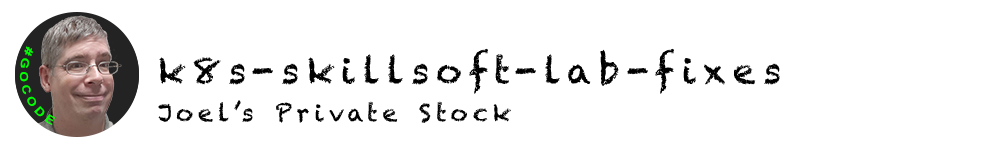
<style>
.page{position:relative;width:1000px;height:150px;background:#ffffff}
.page>*{position:absolute;margin:0}
.t1{font:11.2px "Arial-BoldMT";letter-spacing:0.2em;color:#00ff00}
.t2{font:36px "Chalkduster";letter-spacing:0.2em;color:#000000}
.t3{font:24px "Chalkduster";letter-spacing:0.2em;color:#000000}
</style>
<div class="page">
<p class="t1" style="left:19px;top:46px;width:37px;height:80px;rotate:72deg">#GOCODE</p>
<p class="t2" style="left:159px;top:48px;width:621px;height:46px">k8s-skillsoft-lab-fixes</p>
<p class="t3" style="left:158px;top:100px;width:353px;height:23px">Joel’s Private Stock</p>
</div>
